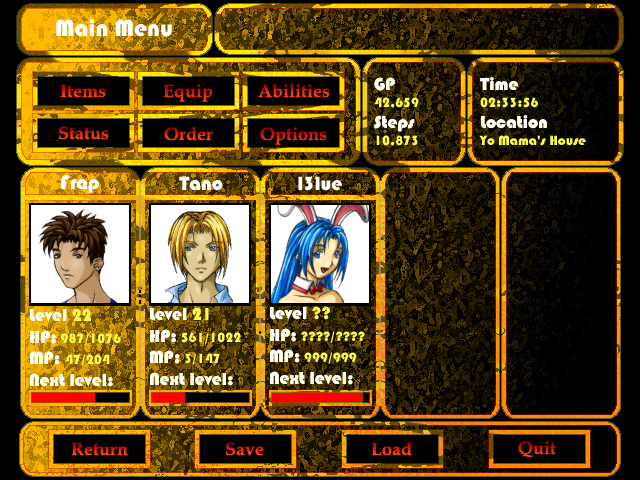
<style>
.page{position:relative;width:640px;height:480px;background:#000000}
.page>*{position:absolute;margin:0}
.t1{font:24px "Bauhaus93";color:#ffffff}
.t2{font:14px "Bauhaus93"}
.t3{font:18px "Bauhaus93"}
.t4{font:18px "Bauhaus93";color:#ffffff}
.t5{font:18px "BookAntiqua-Bold"}
.t6{font:18px "BookAntiqua-Bold";color:#f33100}
.t7{font:20px "Bauhaus93";color:#ffffff}
.t8{font:14px "Bauhaus93";color:#ffffff}
</style>
<div class="page">
<p class="t1" style="left:56px;top:19px;width:116px;height:18px">Main Menu</p>
<p class="t2" style="left:374px;top:77px;width:45px;height:69px"><span class="t3">GP<br></span>42,659<br><span class="t3">Steps<br></span>10,873</p>
<p class="t4" style="left:374px;top:77px;width:41px;height:55px">GP<br><br>Steps</p>
<p class="t2" style="left:479px;top:77px;width:107px;height:69px"><span class="t3">Time<br></span>02:33:56<br><span class="t3">Location<br></span>Yo Mama's House</p>
<p class="t4" style="left:480px;top:77px;width:67px;height:51px">Time<br><br>Location</p>
<p class="t5" style="left:60px;top:84px;width:46px;height:14px">Items</p>
<p class="t5" style="left:163px;top:84px;width:50px;height:18px">Equip</p>
<p class="t6" style="left:258px;top:83px;width:72px;height:15px">Abilities</p>
<p class="t6" style="left:58px;top:126px;width:51px;height:14px">Status</p>
<p class="t6" style="left:164px;top:126px;width:49px;height:15px">Order</p>
<p class="t5" style="left:260px;top:127px;width:67px;height:18px">Options</p>
<p class="t7" style="left:61px;top:175px;width:38px;height:18px">Frap</p>
<p class="t7" style="left:179px;top:176px;width:44px;height:15px">Tano</p>
<p class="t7" style="left:298px;top:176px;width:44px;height:15px">l3lue</p>
<p class="t4" style="left:30px;top:308px;width:91px;height:79px">Level 22<br>HP:<span class="t8"> 987/1076<br></span>MP: <span class="t8">47/204</span> <br>Next level:</p>
<p class="t4" style="left:30px;top:309px;width:83px;height:78px">Level <br>HP: <br>MP:  <br>Next level:</p>
<p class="t4" style="left:150px;top:307px;width:91px;height:79px">Level 21<br>HP:<span class="t8"> 561/1022<br></span>MP:<span class="t8"> 3/147<br></span>Next level:</p>
<p class="t4" style="left:150px;top:308px;width:83px;height:78px">Level <br>HP: <br>MP: <br>Next level:</p>
<p class="t4" style="left:270px;top:306px;width:95px;height:79px">Level ??<br>HP:<span class="t8"> ????/????<br></span>MP:<span class="t8"> 999/999<br></span>Next level:</p>
<p class="t4" style="left:270px;top:307px;width:83px;height:78px">Level <br>HP: <br>MP:<br>Next level:</p>
<p class="t5" style="left:71px;top:442px;width:57px;height:14px">Return</p>
<p class="t6" style="left:225px;top:442px;width:39px;height:14px">Save</p>
<p class="t6" style="left:371px;top:441px;width:41px;height:15px">Load</p>
<p class="t5" style="left:518px;top:441px;width:38px;height:17px">Quit</p>
</div>
